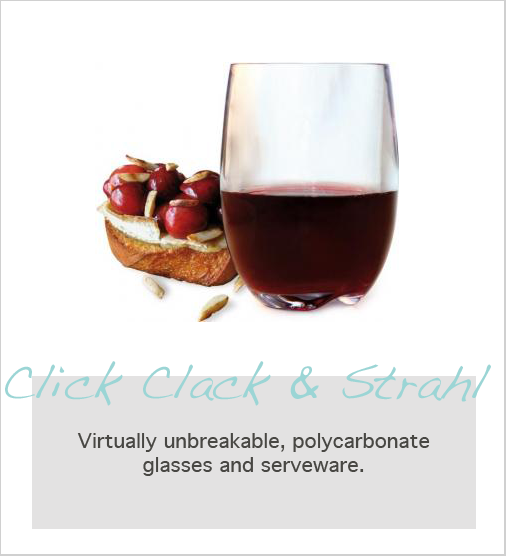
<style>
.page{position:relative;width:506px;height:556px;background:#ffffff}
.page>*{position:absolute;margin:0}
.t1{font:48px "Handwriting-Dakota";color:#9bd5d5}
.t2{font:20px "Geneva";color:#484743}
</style>
<div class="page">
<p class="t1" style="left:5px;top:361px;width:486px;height:45px">Click Clack &amp; Strahl</p>
<p class="t2" style="left:77px;top:433px;width:353px;height:43px;text-align:center">Virtually unbreakable, polycarbonate glasses and serveware.</p>
</div>
